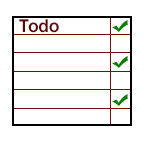
<style>
.page{position:relative;width:144px;height:144px;background:#ffffff}
.page>*{position:absolute;margin:0}
.t1{font:17.6px "Arial-BoldMT";color:#5e0606;scale:0.96 1}
</style>
<div class="page">
<p class="t1" style="left:19px;top:19px;width:40px;height:14px">Todo</p>
</div>
